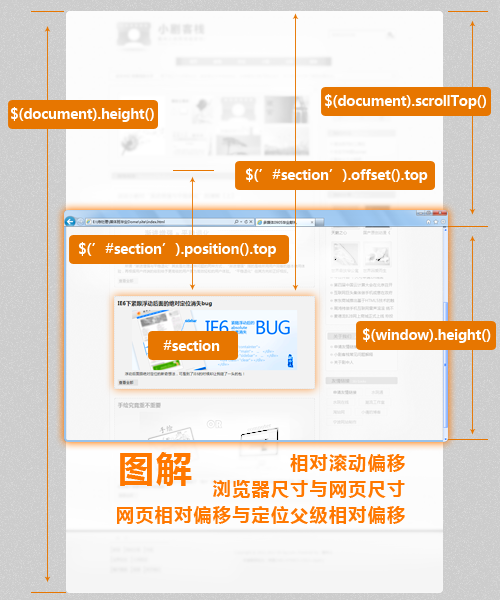
<style>
.page{position:relative;width:500px;height:600px}
.page>*{position:absolute;margin:0}
.t1{font:14px "MicrosoftYaHei-Bold";letter-spacing:-0.025em;color:#ffffff}
.t2{font:18px/26px "MicrosoftYaHei-Bold";letter-spacing:0.075em;color:#ff7800}
.t3{font:36px "MicrosoftYaHei-Bold";letter-spacing:0.05em;color:#ff7800}
</style>
<div class="page">
<p class="t1" style="left:324px;top:94px;width:162px;height:15px">$(document).scrollTop()</p>
<p class="t1" style="left:10px;top:107px;width:144px;height:15px">$(document).height()</p>
<p class="t1" style="left:245px;top:168px;width:183px;height:15px">$(’#section’).offset().top</p>
<p class="t1" style="left:78px;top:242px;width:198px;height:15px">$(’#section’).position().top</p>
<p class="t1" style="left:362px;top:328px;width:129px;height:15px">$(window).height()</p>
<p class="t1" style="left:163px;top:340px;width:57px;height:11px">#section</p>
<p class="t2" style="left:117px;top:454px;width:288px;height:70px;text-align:right">相对滚动偏移<br>浏览器尺寸与网页尺寸<br>网页相对偏移与定位父级相对偏移</p>
<p class="t3" style="left:120px;top:452px;width:72px;height:34px">图解</p>
</div>
